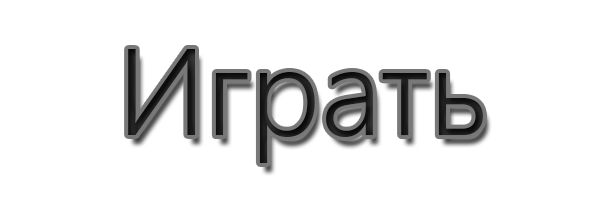
<style>
.page{position:relative;width:600px;height:200px;background:#ffffff}
.page>*{position:absolute;margin:0}
.t1{font:120px "MalgunGothic-Semilight";color:#171717}
</style>
<div class="page">
<p class="t1" style="left:128px;top:49px;width:355px;height:114px">Играть</p>
</div>
